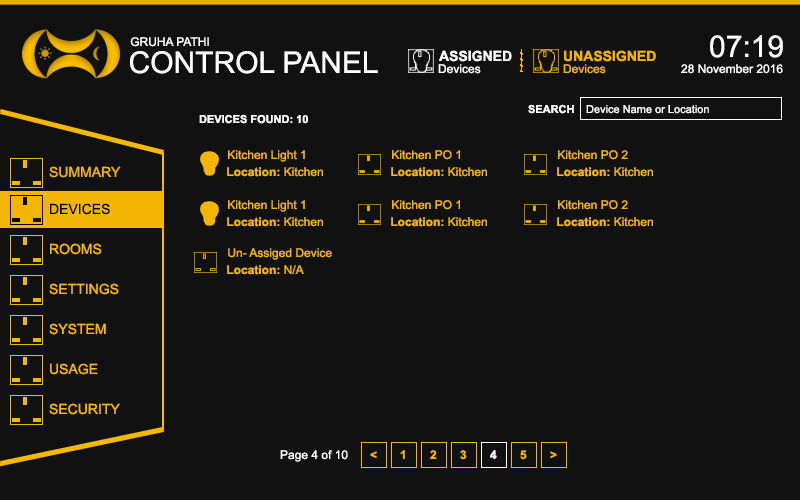
<style>
.page{position:relative;width:800px;height:500px;background:#111111}
.page>*{position:absolute;margin:0}
.t1{font:12px "ArialMT";color:#ffffff}
.t2{font:30px "ArialMT";color:#ffffff}
.t3{font:14px "Arial-BoldMT";color:#ffffff}
.t4{font:14px "Arial-BoldMT";color:#f1b500}
.t5{font:12px "ArialMT";color:#f5b800}
.t6{font:11px "Arial-BoldMT";color:#ffffff}
.t7{font:11px "ArialMT";color:#ffffff}
.t8{font:14px "ArialMT";color:#f2b600}
.t9{font:12px "Arial-BoldMT";color:#f5b800}
.t10{font:14px "ArialMT";color:#000000}
.t11{font:14px "ArialMT";color:#f5b800}
.t12{font:12px "Arial-BoldMT";color:#ffffff}
</style>
<div class="page">
<p class="t1" style="left:130px;top:37px;width:79px;height:10px">GRUHA PATHI</p>
<p class="t2" style="left:710px;top:35px;width:73px;height:23px">07:19</p>
<p class="t2" style="left:130px;top:51px;width:248px;height:23px">CONTROL PANEL</p>
<p class="t3" style="left:439px;top:50px;width:73px;height:12px">ASSIGNED</p>
<p class="t4" style="left:564px;top:50px;width:92px;height:12px">UNASSIGNED</p>
<p class="t1" style="left:438px;top:64px;width:43px;height:10px">Devices</p>
<p class="t5" style="left:563px;top:64px;width:43px;height:10px">Devices</p>
<p class="t1" style="left:681px;top:64px;width:102px;height:10px">28 November 2016</p>
<p class="t6" style="left:528px;top:104px;width:46px;height:10px">SEARCH</p>
<p class="t7" style="left:586px;top:105px;width:123px;height:9px">Device Name or Location</p>
<p class="t6" style="left:199px;top:114px;width:109px;height:10px">DEVICES FOUND: 10</p>
<p class="t5" style="left:228px;top:150px;width:77px;height:12px">Kitchen Light 1</p>
<p class="t5" style="left:392px;top:150px;width:68px;height:10px">Kitchen PO 1</p>
<p class="t5" style="left:558px;top:150px;width:70px;height:10px">Kitchen PO 2</p>
<p class="t8" style="left:49px;top:166px;width:72px;height:12px">SUMMARY</p>
<p class="t9" style="left:227px;top:167px;width:96px;height:10px">Location:<span class="t5"> Kitchen</span></p>
<p class="t9" style="left:391px;top:167px;width:96px;height:10px">Location:<span class="t5"> Kitchen</span></p>
<p class="t9" style="left:557px;top:167px;width:96px;height:10px">Location:<span class="t5"> Kitchen</span></p>
<p class="t10" style="left:50px;top:203px;width:60px;height:12px">DEVICES</p>
<p class="t5" style="left:228px;top:200px;width:77px;height:12px">Kitchen Light 1</p>
<p class="t5" style="left:392px;top:200px;width:68px;height:10px">Kitchen PO 1</p>
<p class="t5" style="left:558px;top:200px;width:70px;height:10px">Kitchen PO 2</p>
<p class="t9" style="left:227px;top:217px;width:96px;height:10px">Location:<span class="t5"> Kitchen</span></p>
<p class="t9" style="left:391px;top:217px;width:96px;height:10px">Location:<span class="t5"> Kitchen</span></p>
<p class="t9" style="left:557px;top:217px;width:96px;height:10px">Location:<span class="t5"> Kitchen</span></p>
<p class="t11" style="left:50px;top:243px;width:52px;height:12px">ROOMS</p>
<p class="t5" style="left:228px;top:248px;width:104px;height:12px">Un- Assiged Device</p>
<p class="t9" style="left:227px;top:265px;width:77px;height:10px">Location:<span class="t5"> N/A</span></p>
<p class="t11" style="left:49px;top:283px;width:70px;height:12px">SETTINGS</p>
<p class="t11" style="left:49px;top:323px;width:57px;height:12px">SYSTEM</p>
<p class="t11" style="left:50px;top:363px;width:48px;height:12px">USAGE</p>
<p class="t11" style="left:49px;top:403px;width:71px;height:12px">SECURITY</p>
<p class="t1" style="left:280px;top:450px;width:68px;height:12px">Page 4 of 10</p>
<p class="t9" style="left:370px;top:451px;width:7px;height:8px">&lt;</p>
<p class="t9" style="left:400px;top:450px;width:5px;height:9px">1</p>
<p class="t9" style="left:430px;top:450px;width:7px;height:9px">2</p>
<p class="t9" style="left:460px;top:450px;width:7px;height:10px">3</p>
<p class="t12" style="left:490px;top:450px;width:7px;height:9px">4</p>
<p class="t9" style="left:520px;top:450px;width:7px;height:10px">5</p>
<p class="t9" style="left:550px;top:451px;width:7px;height:8px">&gt;</p>
</div>
